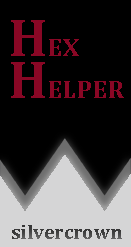
<style>
.page{position:relative;width:131px;height:247px;background:#000000}
.page>*{position:absolute;margin:0}
.t1{font:26.4px "Cambria-Bold";color:#890725}
.t2{font:53.6px "Cambria-Bold";color:#890725}
.t3{font:20.4px "Cambria-Bold";color:#434343}
</style>
<div class="page">
<p class="t1" style="left:11px;top:20px;width:68px;height:36px"><span class="t2">H</span>EX</p>
<p class="t1" style="left:11px;top:62px;width:113px;height:36px"><span class="t2">H</span>ELPER</p>
<p class="t3" style="left:12px;top:225px;width:110px;height:14px">silvercrown</p>
</div>
